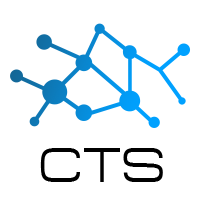
<style>
.page{position:relative;width:200px;height:200px;background:#ffffff}
.page>*{position:absolute;margin:0}
.t1{font:48px "MinimaExpandedSSiExpanded";color:#000000}
</style>
<div class="page">
<p class="t1" style="left:40px;top:148px;width:123px;height:34px">CTS</p>
</div>
